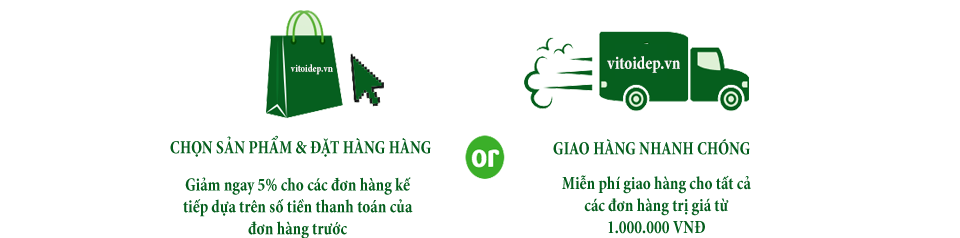
<style>
.page{position:relative;width:960px;height:238px;background:#ffffff}
.page>*{position:absolute;margin:0}
.t1{font:10.5px "MinionPro-BoldCn";color:#f9faf9;scale:0.91 1}
.t2{font:18.3px "MinionPro-BoldCn";color:#f9faf9;scale:0.91 1}
.t3{font:18.3px "MinionPro-BoldCn";color:#065f1e;scale:0.91 1}
.t4{font:18.3px "MinionPro-BoldCn";color:#065f1f;scale:0.91 1}
</style>
<div class="page">
<p class="t1" style="left:290px;top:64px;width:43px;height:11px">vitoidep.vn</p>
<p class="t2" style="left:607px;top:56px;width:73px;height:17px">vitoidep.vn</p>
<p class="t3" style="left:170px;top:135px;width:261px;height:22px">CHỌN SẢN PHẨM &amp; ĐẶT HÀNG HÀNG</p>
<p class="t4" style="left:553px;top:138px;width:197px;height:17px">GIAO HÀNG NHANH CHÓNG</p>
<p class="t3" style="left:183px;top:177px;width:230px;height:62px;text-align:center">Giảm ngay 5% cho các đơn hàng kế tiếp dựa trên số tiền thanh toán của đơn hàng trước</p>
<p class="t4" style="left:562px;top:175px;width:189px;height:59px;text-align:center">Miễn phí giao hàng cho tất cả các đơn hàng trị giá từ 1.000.000 VNĐ</p>
</div>
